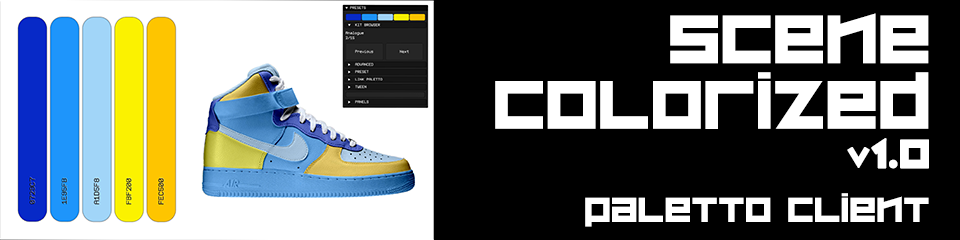
<style>
.page{position:relative;width:960px;height:240px;background:#000000}
.page>*{position:absolute;margin:0}
.t1{font:80.7px/65.5px "ZipSonik";color:#ffffff}
.t2{font:46.5px "ZipSonik";color:#ffffff;font-variant:small-caps;font-weight:bold}
.t3{font:41.1px "ZipSonik";color:#ffffff}
.t4{font:41.1px "ZipSonik";color:#ffffff;font-variant:small-caps}
</style>
<div class="page">
<p class="t1" style="left:495px;top:13px;width:434px;height:116px;text-align:right">Scene<br>COLORiZED</p>
<p class="t2" style="left:847px;top:138px;width:82px;height:31px">v1.0</p>
<p class="t3" style="left:585px;top:193px;width:344px;height:34px">Paletto <span class="t4">CLIENT</span></p>
</div>
